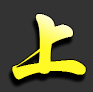
<style>
.page{position:relative;width:93px;height:92px;background:#333333}
.page>*{position:absolute;margin:0}
.t1{font:99px "STXingkai"}
</style>
<div class="page">
<p class="t1" style="left:12px;top:14px;width:74px;height:66px">上</p>
</div>
